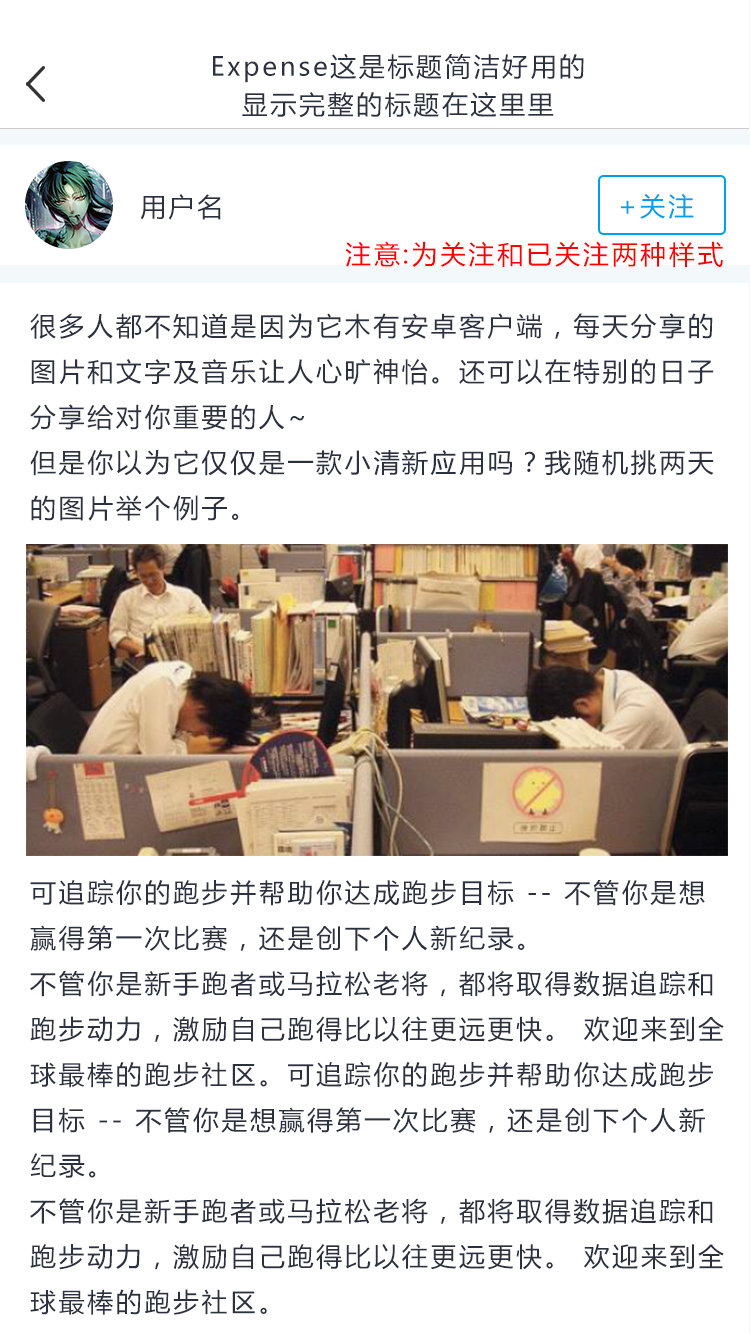
<style>
.page{position:relative;width:750px;height:1334px;background:#ffffff}
.page>*{position:absolute;margin:0}
.t1{font:26px/38px "MicrosoftYaHei";letter-spacing:0.1em;color:#2b313f}
.t2{font:26px "MicrosoftYaHei";letter-spacing:0.1em;color:#2b313f}
.t3{font:26px "MicrosoftYaHei";letter-spacing:0.1em;color:#00a0e9}
.t4{font:26px "MicrosoftYaHei";letter-spacing:0.1em;color:#fe0000}
</style>
<div class="page">
<p class="t1" style="left:213px;top:53px;width:371px;height:65px;text-align:center">Expense这是标题简洁好用的<br>显示完整的标题在这里里</p>
<p class="t2" style="left:140px;top:194px;width:81px;height:26px">用户名</p>
<p class="t3" style="left:621px;top:193px;width:73px;height:26px">+关注</p>
<p class="t4" style="left:345px;top:241px;width:378px;height:27px">注意:为关注和已关注两种样式</p>
<p class="t2" style="left:30px;top:313px;width:684px;height:208px">很多人都不知道是因为它木有安卓客户端，每天分享的图片和文字及音乐让人心旷神怡。还可以在特别的日子分享给对你重要的人~<br>但是你以为它仅仅是一款小清新应用吗？我随机挑两天的图片举个例子。</p>
<p class="t2" style="left:30px;top:879px;width:694px;height:436px">可追踪你的跑步并帮助你达成跑步目标 -- 不管你是想赢得第一次比赛，还是创下个人新纪录。 <br>不管你是新手跑者或马拉松老将，都将取得数据追踪和跑步动力，激励自己跑得比以往更远更快。 欢迎来到全球最棒的跑步社区。可追踪你的跑步并帮助你达成跑步目标 -- 不管你是想赢得第一次比赛，还是创下个人新纪录。 <br>不管你是新手跑者或马拉松老将，都将取得数据追踪和跑步动力，激励自己跑得比以往更远更快。 欢迎来到全球最棒的跑步社区。</p>
</div>
